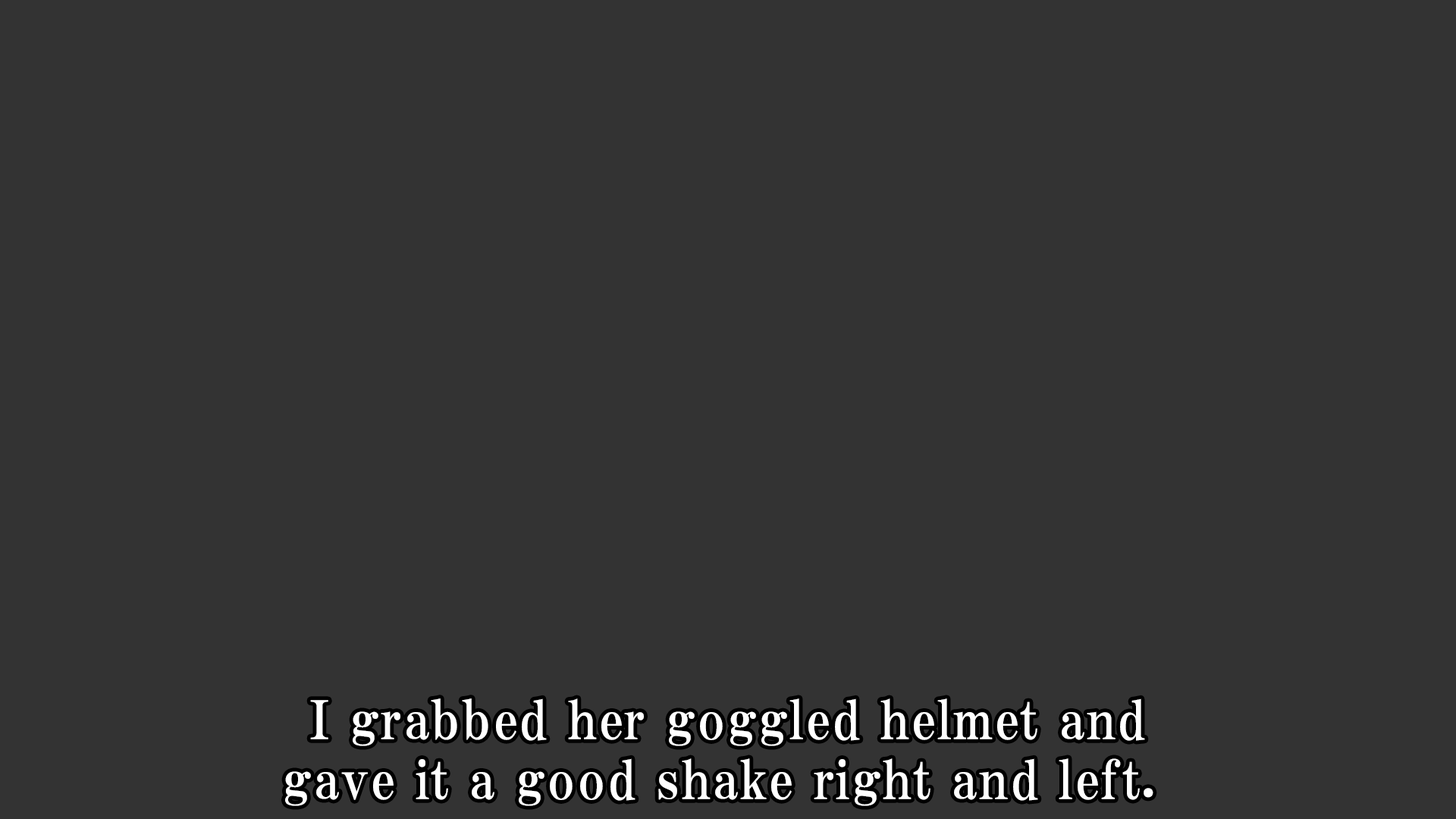
<style>
.page{position:relative;width:1456px;height:819px;background:#333333}
.page>*{position:absolute;margin:0}
.t1{font:53.1px/59.9px "HGPMinchoE";letter-spacing:0.025em;color:#ffffff}
</style>
<div class="page">
<p class="t1" style="left:285px;top:698px;width:868px;height:108px;text-align:center">I grabbed her goggled helmet and<br>gave it a good shake right and left.</p>
</div>
